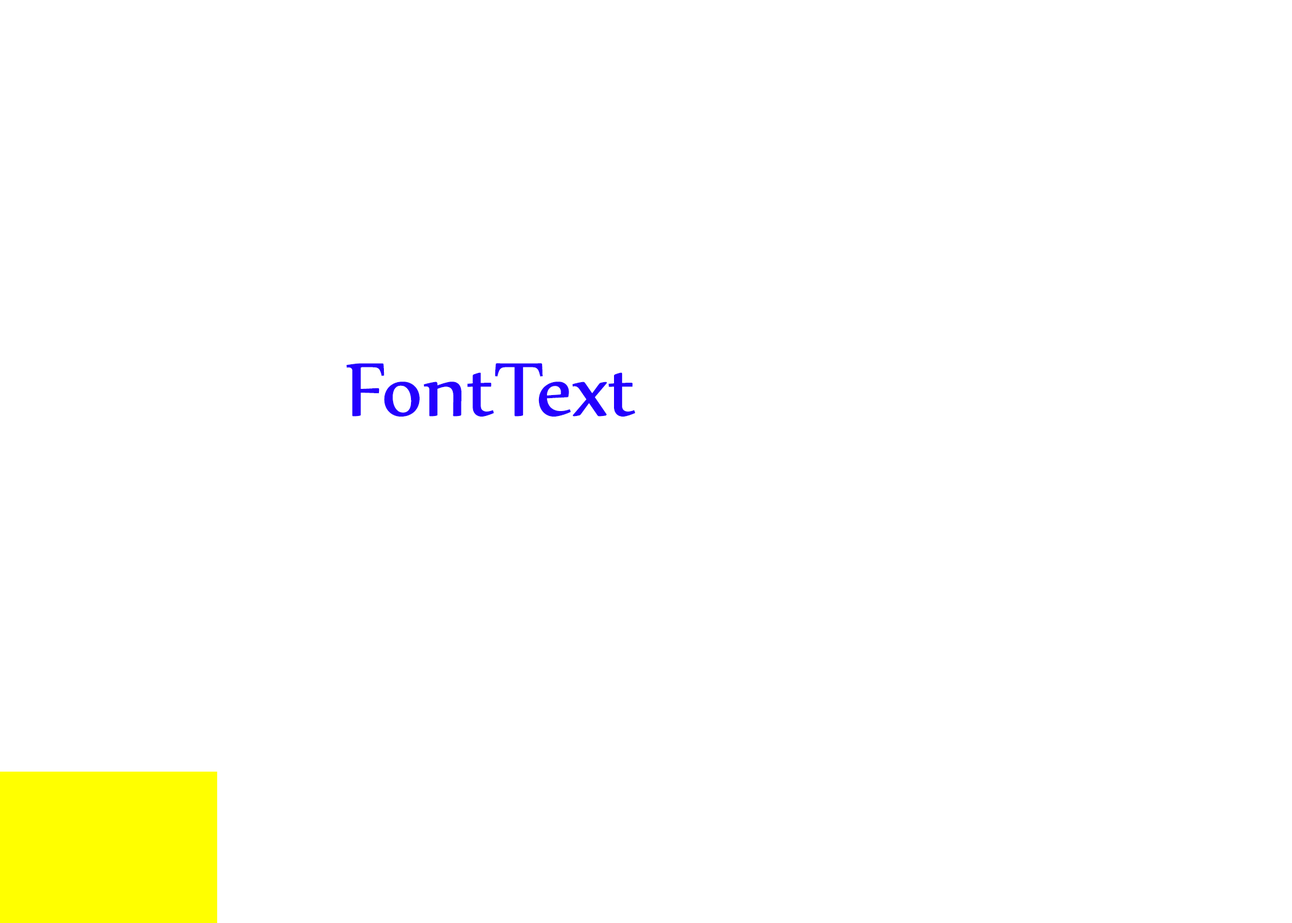
<style>
.page{position:relative;width:1292px;height:923px;background:#ffffff}
.page>*{position:absolute;margin:0}
.t1{font:92.3px "Nyala-Regular";color:#2400fe}
</style>
<div class="page">
<p class="t1" style="left:346px;top:363px;width:290px;height:54px">FontText</p>
</div>
